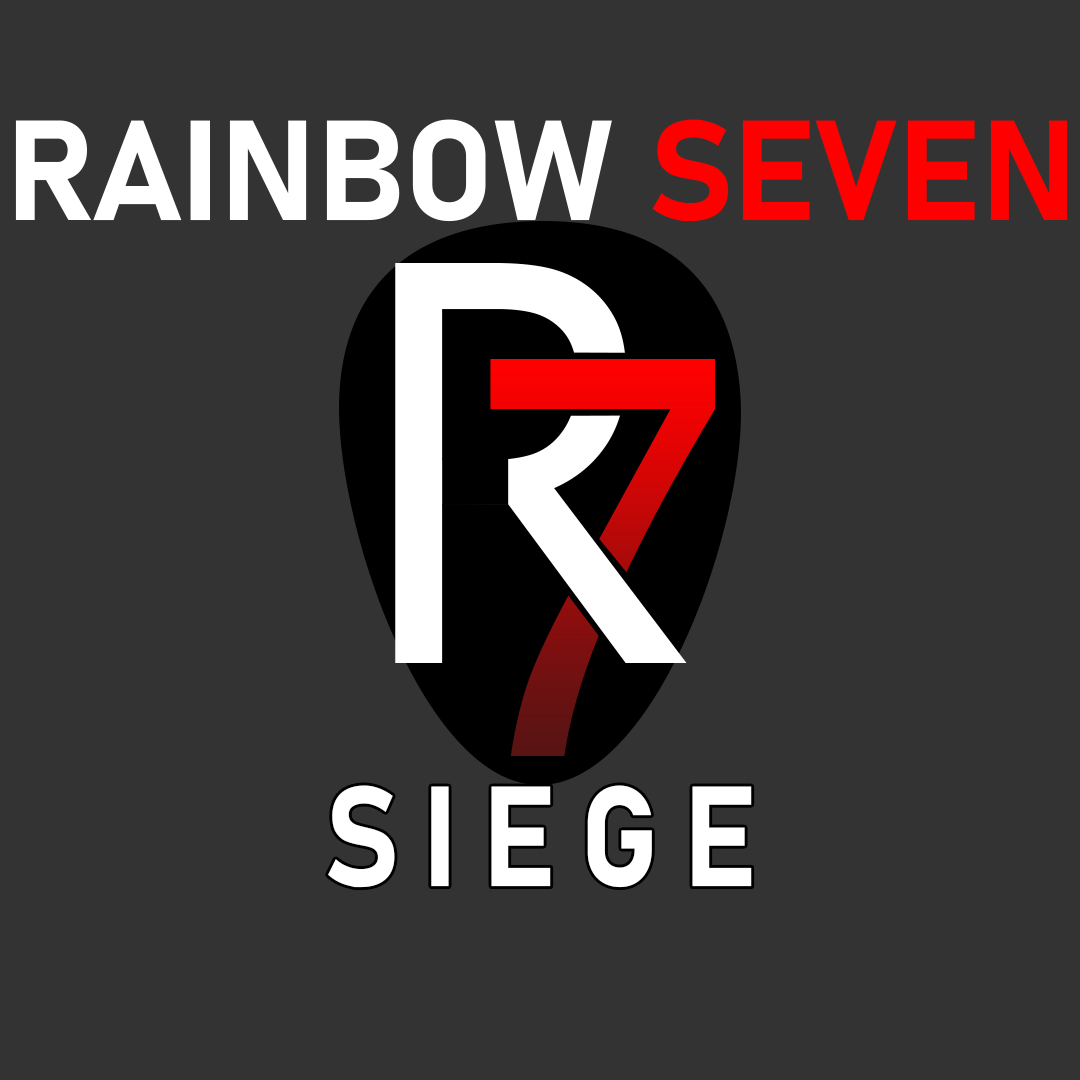
<style>
.page{position:relative;width:1080px;height:1080px;background:#333333}
.page>*{position:absolute;margin:0}
.t1{font:140px "Bahnschrift-Bold";letter-spacing:-0.005em;color:#ffffff}
.t2{font:140px "Bahnschrift-Bold";letter-spacing:-0.005em;color:#ff0000}
.t3{font:140px "Bahnschrift-Bold";letter-spacing:0.2em;color:#ffffff;scale:0.88 1}
</style>
<div class="page">
<p class="t1" style="left:15px;top:119px;width:1053px;height:103px">RAINBOW <span class="t2">SEVEN</span></p>
<p class="t3" style="left:328px;top:785px;width:424px;height:103px">SIEGE</p>
</div>
